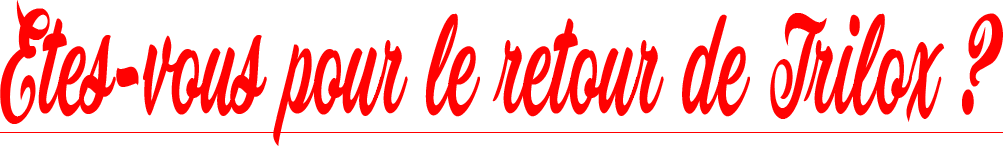
<style>
.page{position:relative;width:1003px;height:146px;background:#ffffff}
.page>*{position:absolute;margin:0}
.t1{font:139.5px "PainterPERSONALUSEONLY";color:#ff0202;scale:0.48 1}
</style>
<div class="page">
<p class="t1" style="left:0px;top:0px;width:1003px;height:146px">Etes-vous pour le retour de Trilox ?</p>
</div>
